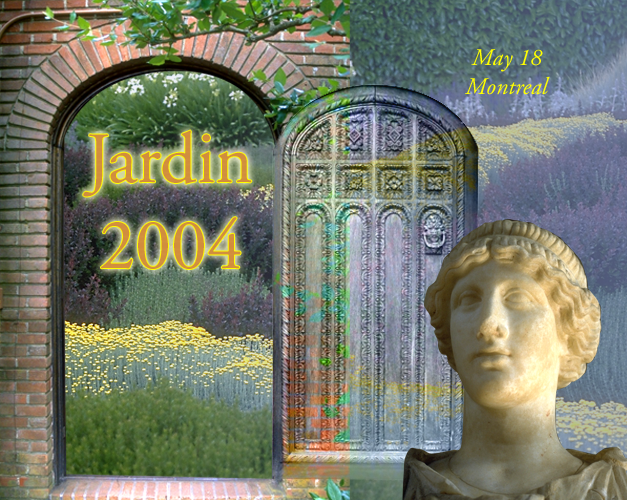
<style>
.page{position:relative;width:627px;height:500px}
.page>*{position:absolute;margin:0}
.t1{font:24px "AGaramond-Italic";color:#ffff00}
.t2{font:72px "AGaramond-Regular";color:#d18e3f}
</style>
<div class="page">
<p class="t1" style="left:465px;top:49px;width:85px;height:46px;text-align:center">May 18<br>Montreal</p>
<p class="t2" style="left:83px;top:130px;width:169px;height:139px;text-align:center">Jardin<br>2004</p>
</div>
